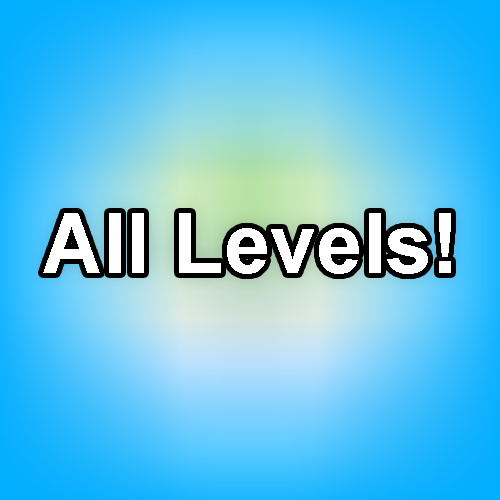
<style>
.page{position:relative;width:500px;height:500px}
.page>*{position:absolute;margin:0}
.t1{font:83.3px "Arial-BoldMT";color:#ffffff}
</style>
<div class="page">
<p class="t1" style="left:43px;top:213px;width:408px;height:61px">All Levels!</p>
</div>
